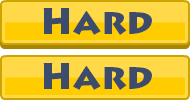
<style>
.page{position:relative;width:190px;height:100px;background:#ffd948}
.page>*{position:absolute;margin:0}
.t1{font:36px "LithosPro-Black";color:#3d4c6b}
</style>
<div class="page">
<p class="t1" style="left:43px;top:8px;width:109px;height:27px">Hard</p>
<p class="t1" style="left:43px;top:63px;width:109px;height:27px">Hard</p>
</div>
